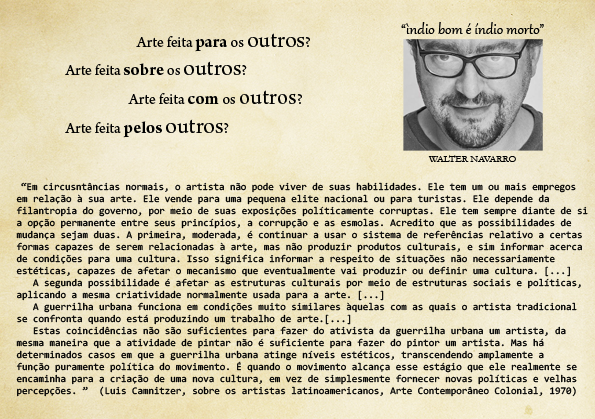
<style>
.page{position:relative;width:595px;height:419px}
.page>*{position:absolute;margin:0}
.t1{font:18px "Gabriola";color:#000000}
.t2{font:16px "ArnoPro-Regular";color:#000000}
.t3{font:18px "ArnoPro-Regular";color:#000000}
.t4{font:18px "ArnoPro-Bold";color:#000000}
.t5{font:24px "ArnoPro-Regular";color:#000000}
.t6{font:10px "Garamond";color:#000000}
.t7{font:10px "Consolas";color:#000000}
.t8{font:12px "ArnoPro-Regular";color:#000000}
</style>
<div class="page">
<p class="t1" style="left:401px;top:22px;width:143px;height:12px">“ìndio bom é índio morto”</p>
<p class="t2" style="left:65px;top:33px;width:245px;height:105px"><span class="t3">                     </span>Arte feita <span class="t4">para</span> os <span class="t5">outros</span>?<br>Arte feita <span class="t4">sobre</span> os <span class="t5">outros</span>?<br>                     Arte feita <span class="t4">com </span>os <span class="t5">outros</span>?<br>Arte feita <span class="t4">pelos </span><span class="t5">outros</span>?</p>
<p class="t6" style="left:428px;top:155px;width:88px;height:7px">WALTER NAVARRO</p>
<p class="t7" style="left:16px;top:182px;width:572px;height:215px"><span class="t8">  </span>“Em circusntâncias normais, o artista não pode viver de suas habilidades. Ele tem um ou mais empregos <br>em relação à sua arte. Ele vende para uma pequena elite nacional ou para turistas. Ele depende da <br>filantropia do governo, por meio de suas exposições políticamente corruptas. Ele tem sempre diante de si <br>a opção permanente entre seus princípios, a corrupção e as esmolas. Acredito que as possibilidades de <br>mudança sejam duas. A primeira, moderada, é continuar a usar o sistema de referências relativo a certas <br>formas capazes de serem relacionadas à arte, mas não produzir produtos culturais, e sim informar acerca <br>de condições para uma cultura. Isso significa informar a respeito de situações não necessariamente <br>estéticas, capazes de afetar o mecanismo que eventualmente vai produzir ou definir uma cultura. [...] <br>   A segunda possibilidade é afetar as estruturas culturais por meio de estruturas sociais e políticas, <br>aplicando a mesma criatividade normalmente usada para a arte. [...]<br>   A guerrilha urbana funciona em condições muito similares àquelas com as quais o artista tradicional <br>se confronta quando está produzindo um trabalho de arte.[...]<br>   Estas coincidências não são suficientes para fazer do ativista da guerrilha urbana um artista, da <br>mesma maneira que a atividade de pintar não é suficiente para fazer do pintor um artista. Mas há <br>determinados casos em que a guerrilha urbana atinge níveis estéticos, transcendendo amplamente a <br>função puramente política do movimento. É quando o movimento alcança esse estágio que ele realmente se <br>encaminha para a criação de uma nova cultura, em vez de simplesmente fornecer novas políticas e velhas <br>percepções. ”  (Luis Camnitzer, sobre os artistas latinoamericanos, Arte Contemporâneo Colonial, 1970)</p>
</div>
